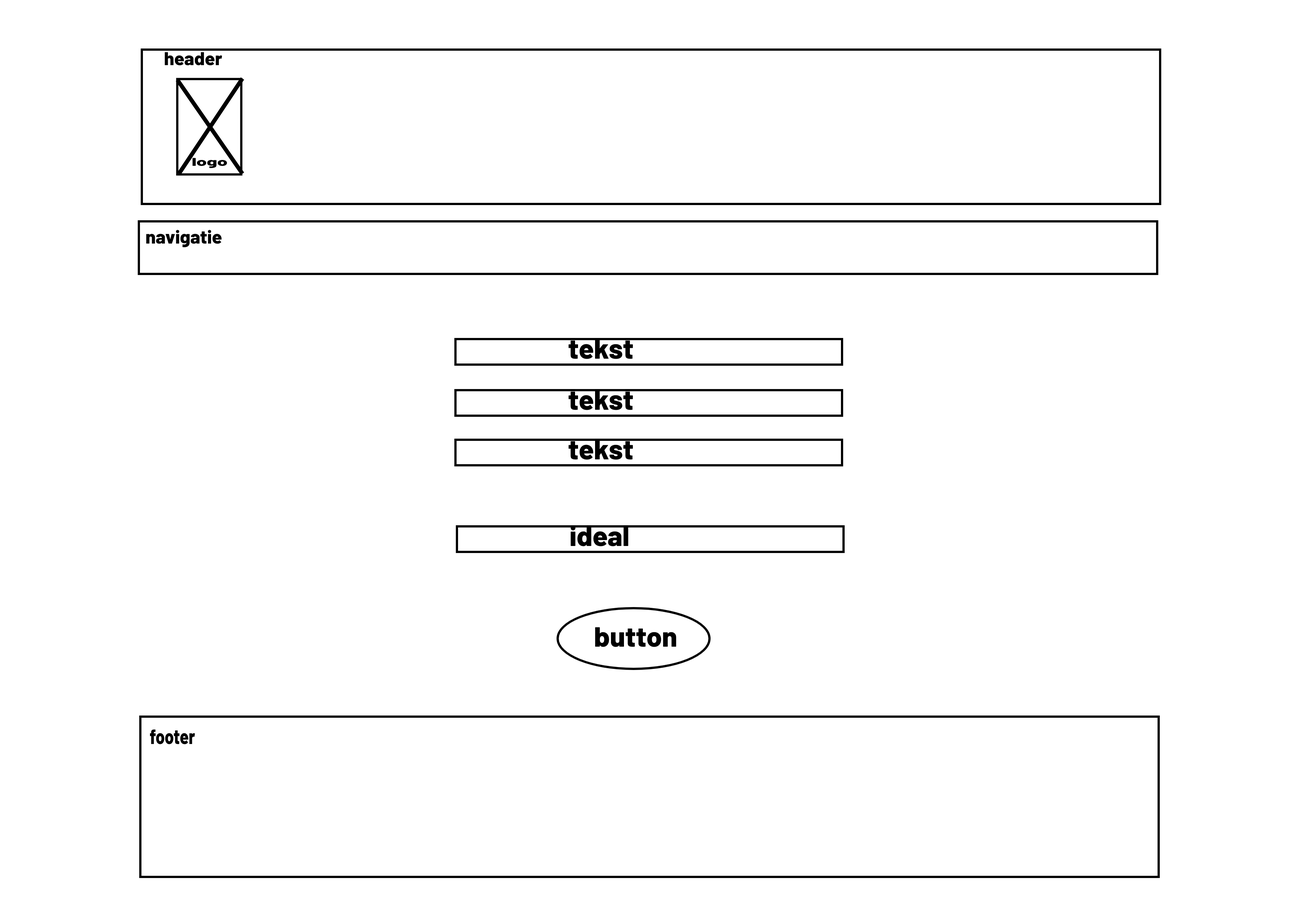
<style>
.page{position:relative;width:1299px;height:918px;background:#ffffff}
.page>*{position:absolute;margin:0}
.t1{font:18.5px "Barlow-ExtraBold";color:#000000}
.t2{font:11.2px "Barlow-ExtraBold";color:#000000;scale:1.66 1}
.t3{font:27.8px "Barlow-ExtraBold";color:#000000}
.t4{font:20.7px "Barlow-ExtraBold";color:#000000;scale:0.78 1}
</style>
<div class="page">
<p class="t1" style="left:165px;top:52px;width:57px;height:14px">header</p>
<p class="t2" style="left:193px;top:158px;width:34px;height:10px">logo</p>
<p class="t1" style="left:146px;top:230px;width:76px;height:17px">navigatie</p>
<p class="t3" style="left:568px;top:339px;width:65px;height:20px">tekst</p>
<p class="t3" style="left:568px;top:390px;width:65px;height:20px">tekst</p>
<p class="t3" style="left:568px;top:440px;width:65px;height:20px">tekst</p>
<p class="t3" style="left:571px;top:525px;width:57px;height:21px">ideal</p>
<p class="t3" style="left:595px;top:627px;width:81px;height:20px">button</p>
<p class="t4" style="left:150px;top:729px;width:45px;height:16px">footer</p>
</div>
